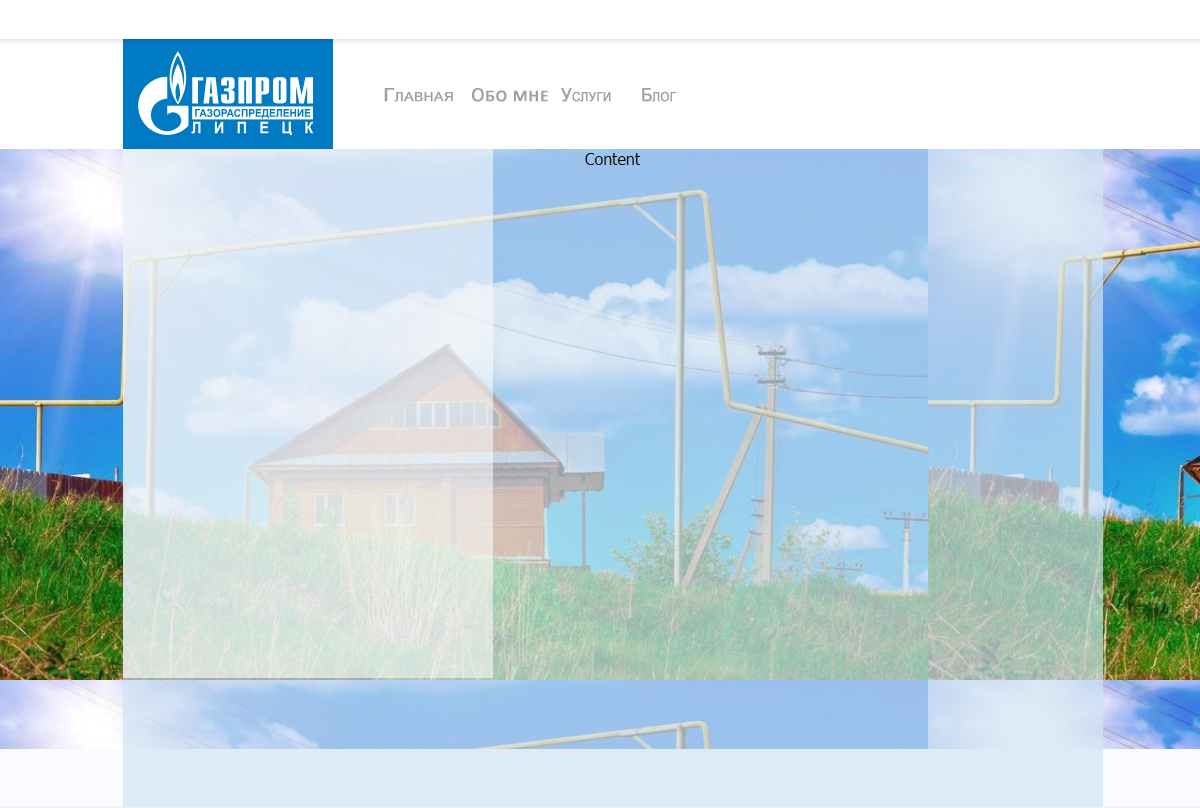
<style>
.page{position:relative;width:1200px;height:808px}
.page>*{position:absolute;margin:0}
.t1{font:18px "ArialMT";color:#a0a0a0;font-variant:small-caps;font-weight:bold;scale:1.11 1}
.t2{font:20px "Calibri";color:#a0a0a0;font-variant:small-caps;font-weight:bold}
.t3{font:18px "ArialNarrow";color:#a0a0a0;font-variant:small-caps;font-weight:bold;scale:1.11 1}
</style>
<div class="page">
<p class="t1" style="left:384px;top:88px;width:69px;height:14px">Главная</p>
<p class="t2" style="left:472px;top:88px;width:76px;height:14px">Обо мне</p>
<p class="t3" style="left:561px;top:88px;width:50px;height:14px">Услуги</p>
<p class="t3" style="left:642px;top:88px;width:34px;height:14px">Блог</p>
</div>
